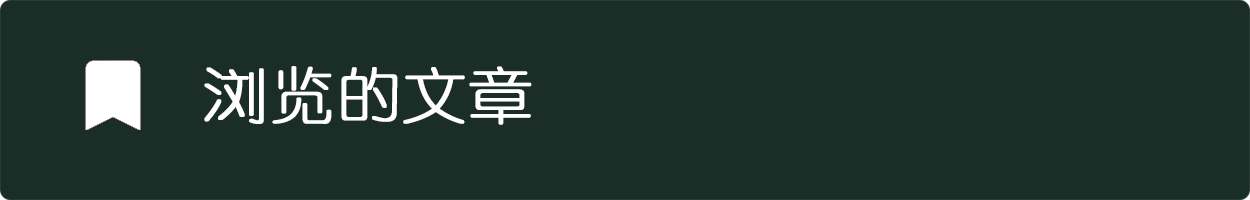
<style>
.page{position:relative;width:1250px;height:200px;background:#1a2d27}
.page>*{position:absolute;margin:0}
.t1{font:60.8px "YouYuan";letter-spacing:0.01em;color:#ffffff;font-weight:bold;scale:1.05 1}
</style>
<div class="page">
<p class="t1" style="left:204px;top:66px;width:328px;height:59px">浏览的文章</p>
</div>
